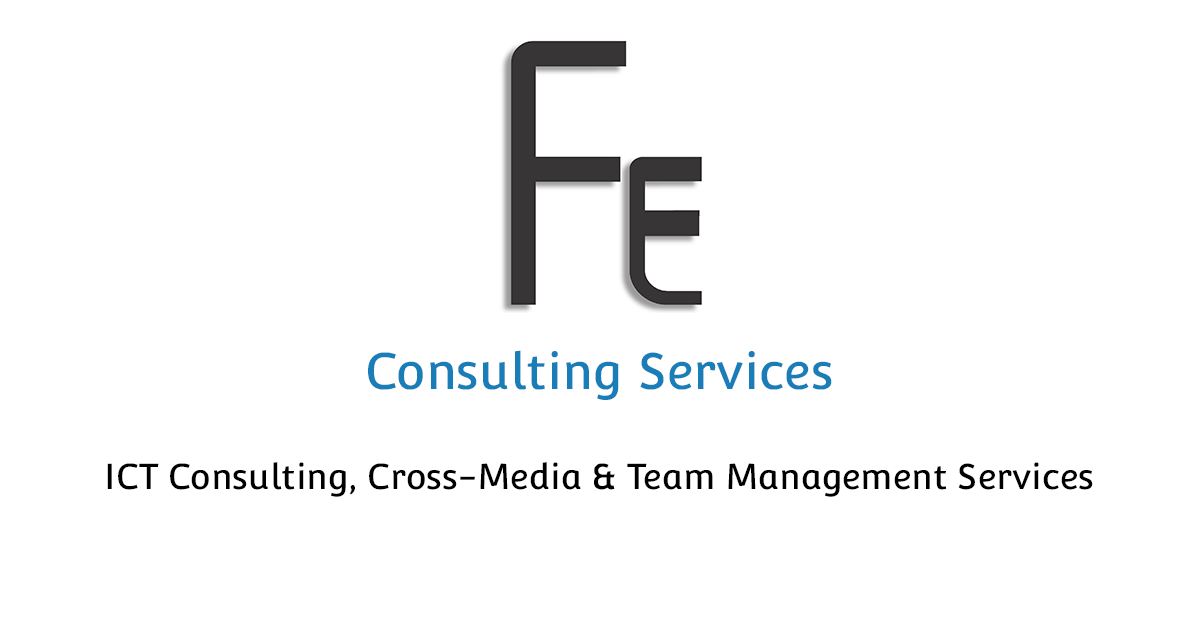
<style>
.page{position:relative;width:1200px;height:627px;background:#ffffff}
.page>*{position:absolute;margin:0}
.t1{font:50px "Convergence-Regular";color:#197db7}
.t2{font:35px "Convergence-Regular";color:#000000}
</style>
<div class="page">
<p class="t1" style="left:368px;top:350px;width:464px;height:50px">Consulting Services</p>
<p class="t2" style="left:107px;top:462px;width:986px;height:35px">ICT Consulting, Cross-Media &amp; Team Management Services</p>
</div>
